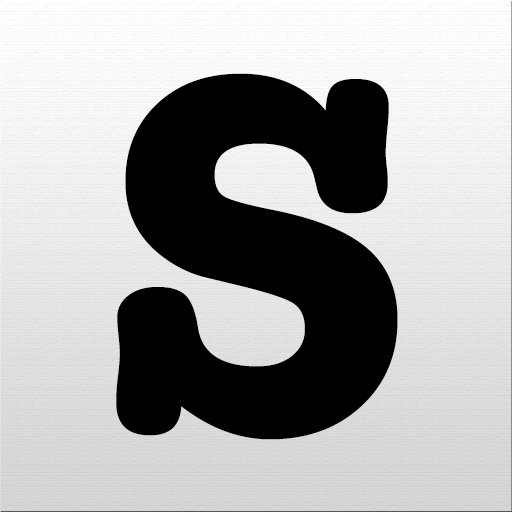
<style>
.page{position:relative;width:512px;height:512px;background:#000000}
.page>*{position:absolute;margin:0}
.t1{font:520px "AmericanTypewriter-Bold";color:#000000}
</style>
<div class="page">
<p class="t1" style="left:116px;top:73px;width:282px;height:367px">S</p>
</div>
